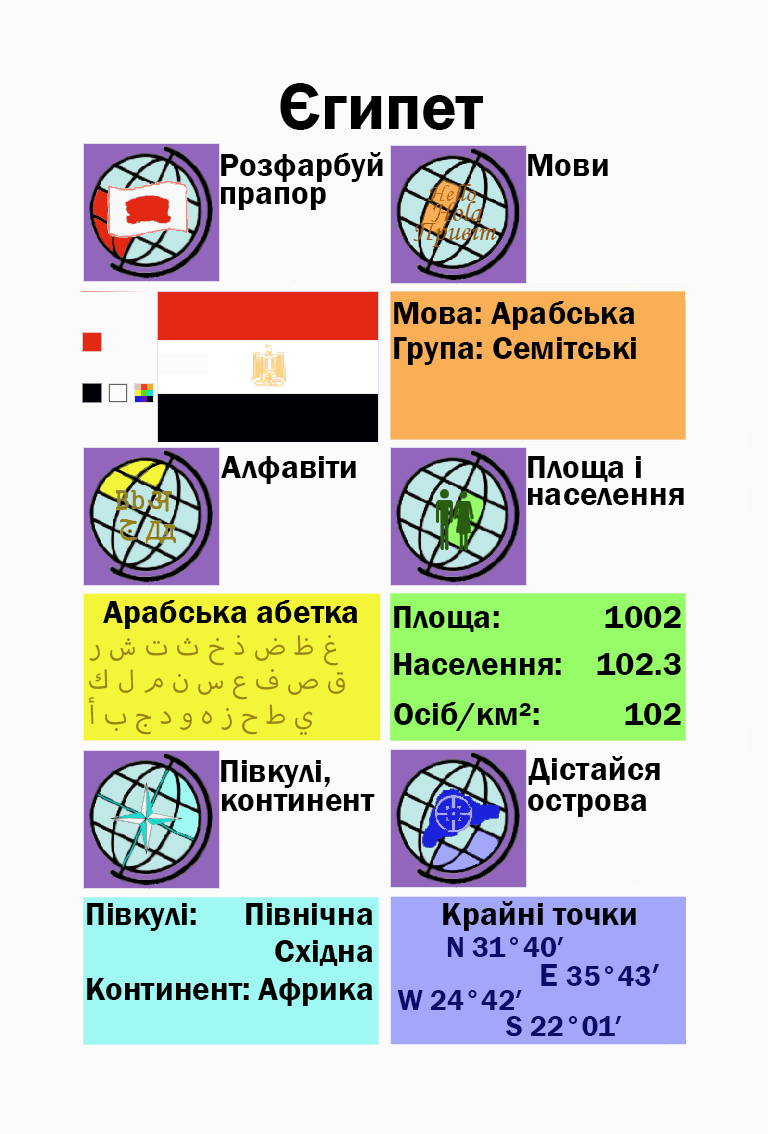
<style>
.page{position:relative;width:768px;height:1134px;background:#fbfbfb}
.page>*{position:absolute;margin:0}
.t1{font:66.7px "FranklinGothic-Demi";color:#000000}
.t2{font:33.3px "FranklinGothic-Demi";color:#000000}
.t3{font:33.3px "FranklinGothic-Demi";color:#000003}
.t4{font:37.5px "MyriadArabic-Regular";color:#988413}
.t5{font:29.2px "FranklinGothic-Demi";color:#988413}
.t6{font:29.2px "FranklinGothic-Demi";color:#090c69}
.t7{font:33.3px "FranklinGothic-Demi";color:#090c69}
</style>
<div class="page">
<p class="t1" style="left:280px;top:83px;width:203px;height:47px">Єгипет</p>
<p class="t2" style="left:221px;top:152px;width:162px;height:30px">Розфарбуй</p>
<p class="t2" style="left:528px;top:154px;width:80px;height:22px">Мови</p>
<p class="t2" style="left:221px;top:187px;width:105px;height:23px">прапор</p>
<p class="t2" style="left:394px;top:301px;width:241px;height:29px">Мова: Арабська</p>
<p class="t2" style="left:394px;top:337px;width:242px;height:28px">Група: Семітські</p>
<p class="t2" style="left:221px;top:456px;width:135px;height:28px">Алфавіти</p>
<p class="t2" style="left:528px;top:456px;width:113px;height:26px">Площа і</p>
<p class="t2" style="left:528px;top:488px;width:156px;height:17px">населення</p>
<p class="t2" style="left:103px;top:600px;width:255px;height:29px">Арабська абетка</p>
<p class="t2" style="left:394px;top:606px;width:105px;height:26px">Площа:</p>
<p class="t3" style="left:605px;top:606px;width:76px;height:22px">1002</p>
<p class="t4" style="left:89px;top:635px;width:250px;height:31px"><span class="t5"><br></span>ر ش ت ث خ ذ ض ظ غ</p>
<p class="t2" style="left:394px;top:653px;width:167px;height:22px">Населення:</p>
<p class="t2" style="left:597px;top:653px;width:84px;height:22px">102.3</p>
<p class="t4" style="left:89px;top:669px;width:256px;height:31px">ك ل م ن س ع ف ص ق</p>
<p class="t4" style="left:88px;top:697px;width:225px;height:38px">أ ب ج د و ه ز ح ط ي</p>
<p class="t2" style="left:394px;top:702px;width:145px;height:29px">Осіб/км²:</p>
<p class="t2" style="left:625px;top:703px;width:56px;height:22px">102</p>
<p class="t2" style="left:221px;top:760px;width:109px;height:28px">Півкулі,</p>
<p class="t2" style="left:528px;top:756px;width:132px;height:29px">Дістайся</p>
<p class="t2" style="left:222px;top:794px;width:153px;height:17px">континент</p>
<p class="t2" style="left:528px;top:794px;width:119px;height:23px">острова</p>
<p class="t2" style="left:87px;top:903px;width:109px;height:28px">Півкулі:</p>
<p class="t2" style="left:246px;top:903px;width:127px;height:22px">Північна</p>
<p class="t3" style="left:443px;top:901px;width:193px;height:30px">Крайні точки</p>
<p class="t2" style="left:275px;top:940px;width:98px;height:26px">Східна</p>
<p class="t6" style="left:447px;top:937px;width:117px;height:20px">N 31°40′</p>
<p class="t6" style="left:541px;top:964px;width:118px;height:22px"><span class="t7">E </span>35°43<span class="t7">′</span></p>
<p class="t2" style="left:87px;top:978px;width:162px;height:22px">Континент:</p>
<p class="t2" style="left:258px;top:978px;width:115px;height:28px">Африка</p>
<p class="t6" style="left:397px;top:990px;width:125px;height:20px">W 24°42′</p>
<p class="t6" style="left:506px;top:1016px;width:116px;height:21px">S 22°01′</p>
</div>
